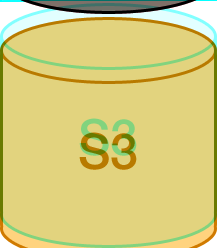
<style>
.page{position:relative;width:217px;height:248px;background:#e2d37e}
.page>*{position:absolute;margin:0}
.t1{font:50px "HelveticaNeueLTPro-Md"}
</style>
<div class="page">
<p class="t1" style="left:79px;top:117px;width:58px;height:38px">S3</p>
</div>
